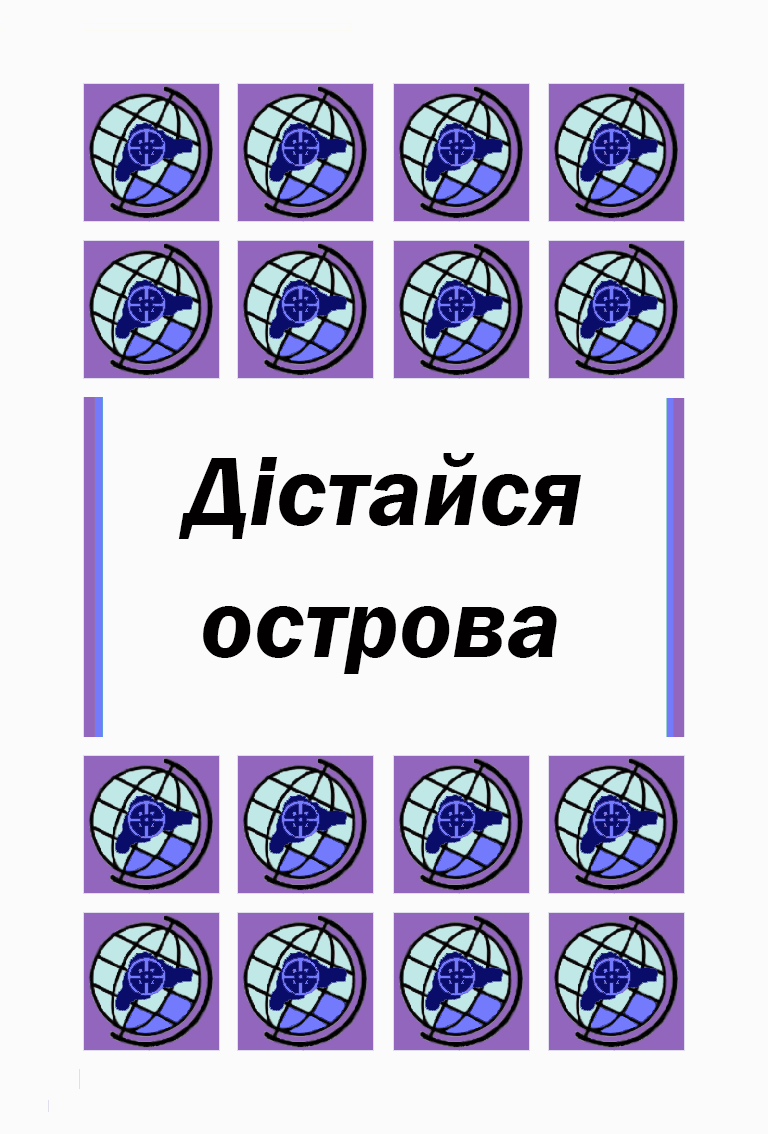
<style>
.page{position:relative;width:768px;height:1134px;background:#fbfbfb}
.page>*{position:absolute;margin:0}
.t1{font:100px "FranklinGothic-DemiItalic";color:#020000}
</style>
<div class="page">
<p class="t1" style="left:178px;top:453px;width:403px;height:86px">Дістайся</p>
<p class="t1" style="left:203px;top:606px;width:354px;height:68px">острова</p>
</div>
